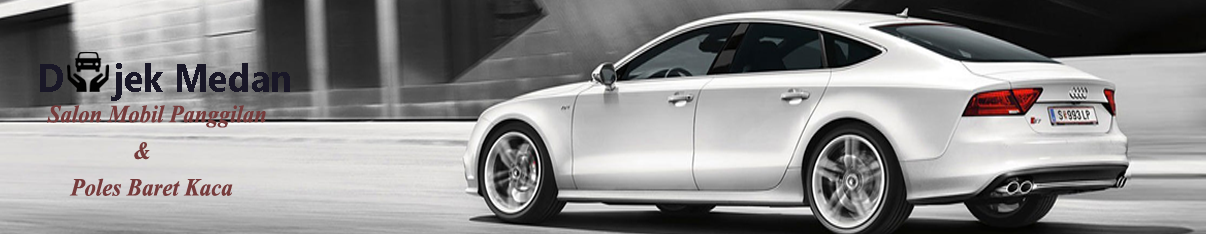
<style>
.page{position:relative;width:1206px;height:234px}
.page>*{position:absolute;margin:0}
.t1{font:39.1px "SegoeUI-Bold";color:#191727;scale:0.93 1}
.t2{font:30.6px "Vijaya-Bold";color:#763b3b;scale:0.93 1}
</style>
<div class="page">
<p class="t1" style="left:40px;top:63px;width:250px;height:38px">D     jek Medan</p>
<p class="t2" style="left:47px;top:105px;width:219px;height:91px">Salon Mobil Panggilan<br>               &amp;<br>    Poles Baret Kaca</p>
</div>
